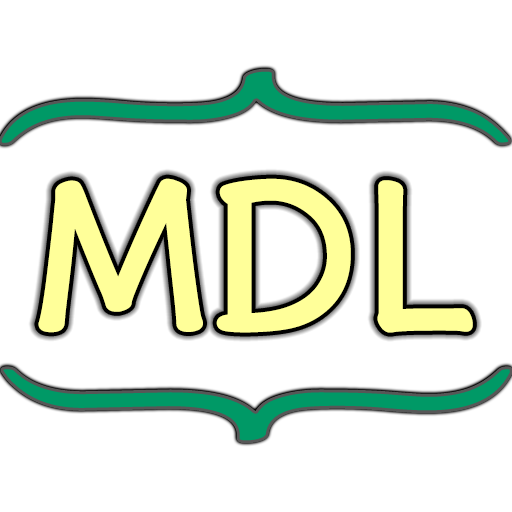
<style>
.page{position:relative;width:512px;height:512px;background:#ffffff}
.page>*{position:absolute;margin:0}
.t1{font:300px "LxgwWenKaiGB-Regular";color:#009966;scale:1.82 1}
.t2{font:200px "LXGWZhenKai";color:#ffff99;font-weight:bold}
</style>
<div class="page">
<p class="t1" style="left:0px;top:68px;width:513px;height:376px">{  }</p>
<p class="t2" style="left:38px;top:178px;width:435px;height:155px">MDL</p>
</div>
